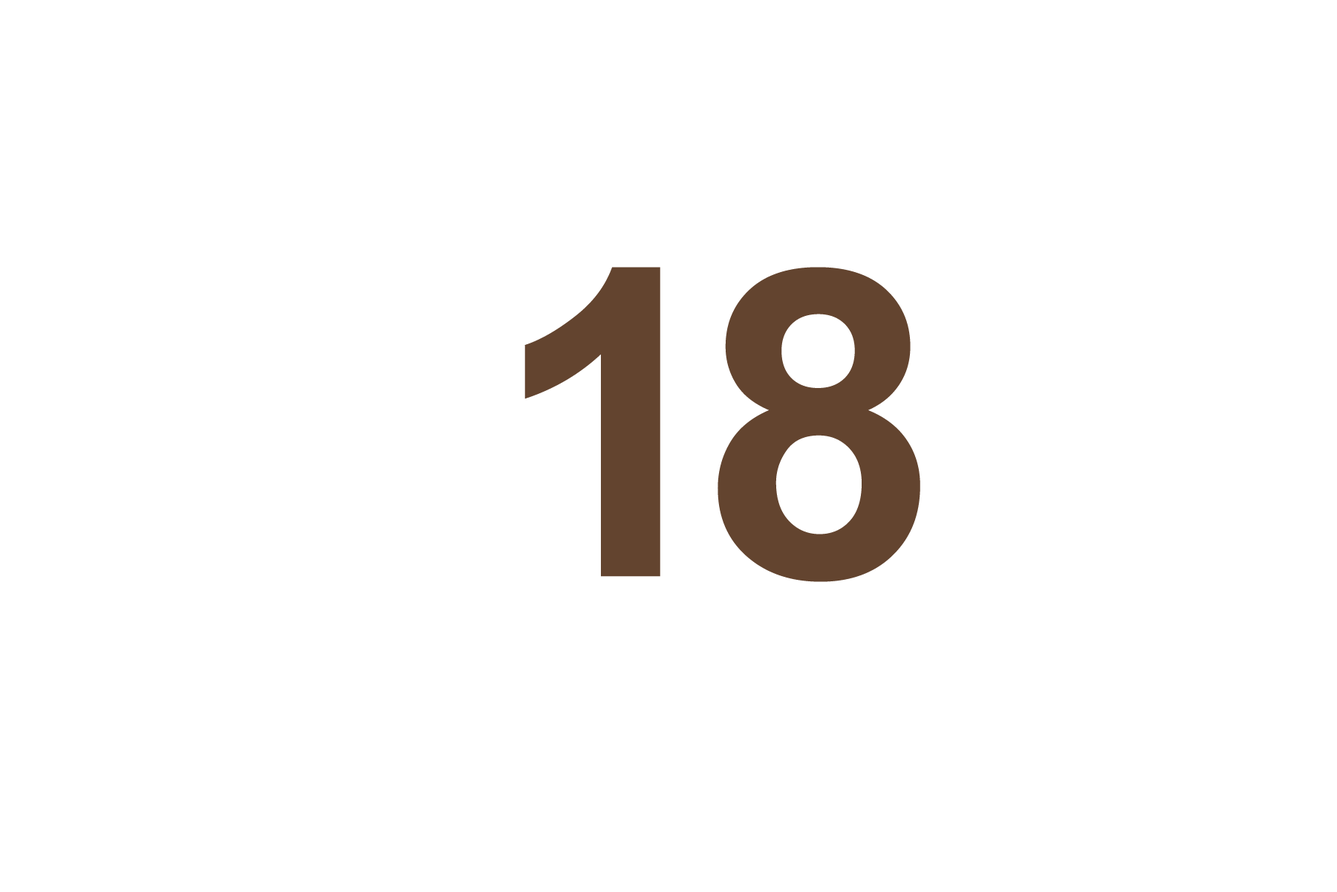
<style>
.page{position:relative;width:1337px;height:892px;background:#ffffff}
.page>*{position:absolute;margin:0}
.t1{font:429.6px "Arial-BoldMT";color:#63442f}
</style>
<div class="page">
<p class="t1" style="left:525px;top:267px;width:396px;height:315px">18</p>
</div>
